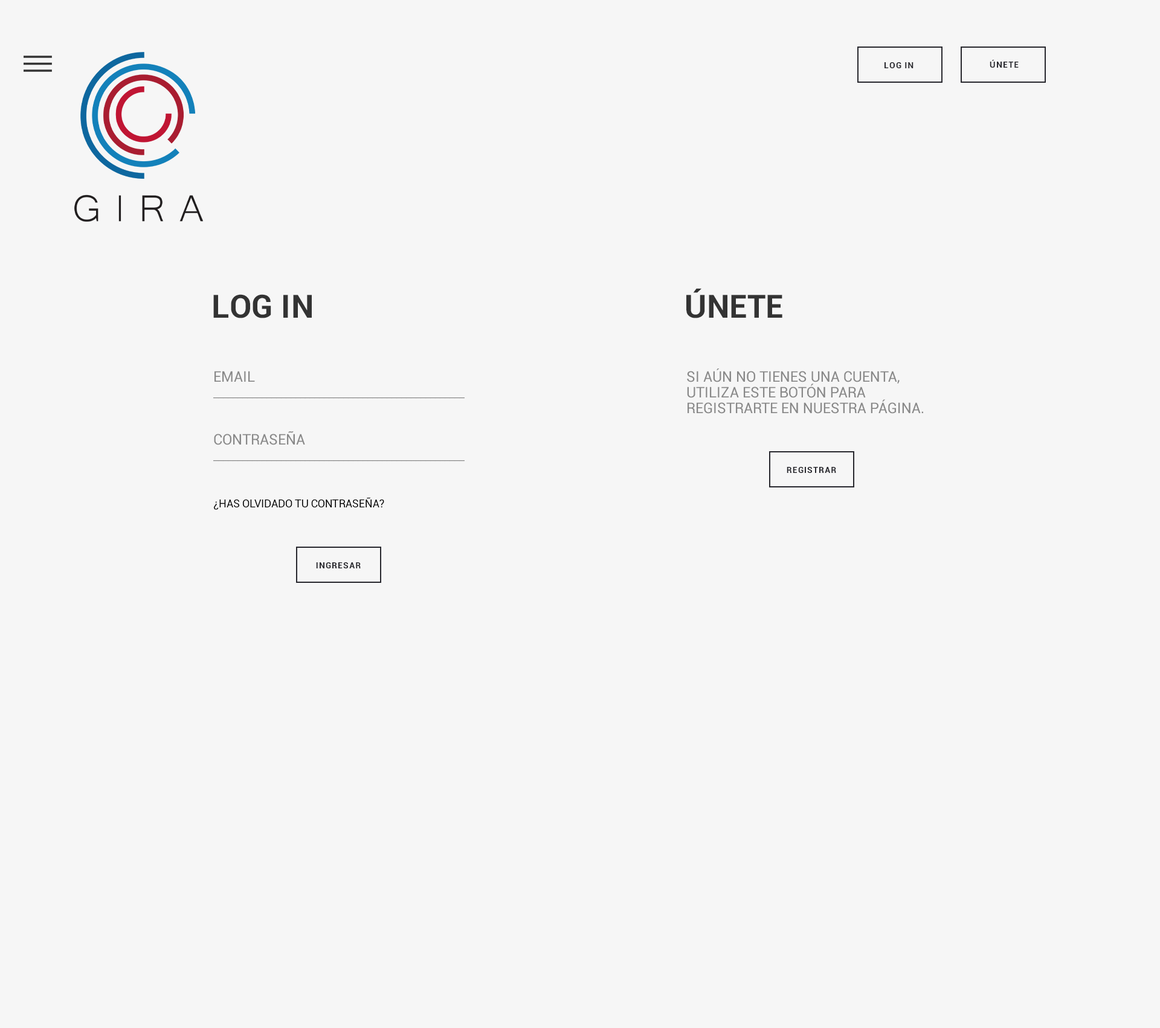
<style>
.page{position:relative;width:1160px;height:1028px;background:#f6f6f6}
.page>*{position:absolute;margin:0}
.t1{font:8.5px "Roboto-Bold";letter-spacing:0.075em;color:#28282e;text-transform:uppercase}
.t2{font:32px "Roboto-Bold";letter-spacing:0.01em;color:#333333}
.t3{font:10.9px/15.7px "Roboto-Regular";color:#888888}
.t4{font:14.5px/15.7px "Roboto-Regular";color:#888888}
.t5{font:10.9px/15.7px "Roboto-Regular";color:#000000}
</style>
<div class="page">
<p class="t1" style="left:884px;top:62px;width:29px;height:6px">LOG IN</p>
<p class="t1" style="left:989px;top:60px;width:29px;height:8px">ÚNETE</p>
<p class="t2" style="left:686px;top:288px;width:96px;height:30px">ÚNETE</p>
<p class="t2" style="left:213px;top:294px;width:99px;height:24px">LOG IN</p>
<p class="t3" style="left:213px;top:371px;width:252px;height:139px"><span class="t4">EMAIL<br></span>____________________________________________________<br><br><br><span class="t4">CONTRASEÑA<br></span>____________________________________________________<br><br><br><span class="t5">¿HAS OLVIDADO TU CONTRASEÑA?</span></p>
<p class="t4" style="left:687px;top:368px;width:236px;height:46px">SI AÚN NO TIENES UNA CUENTA,  UTILIZA ESTE BOTÓN PARA REGISTRARTE EN NUESTRA PÁGINA.</p>
<p class="t1" style="left:786px;top:467px;width:50px;height:6px">REGISTRAR</p>
<p class="t1" style="left:316px;top:562px;width:45px;height:6px">INGRESAR</p>
</div>
